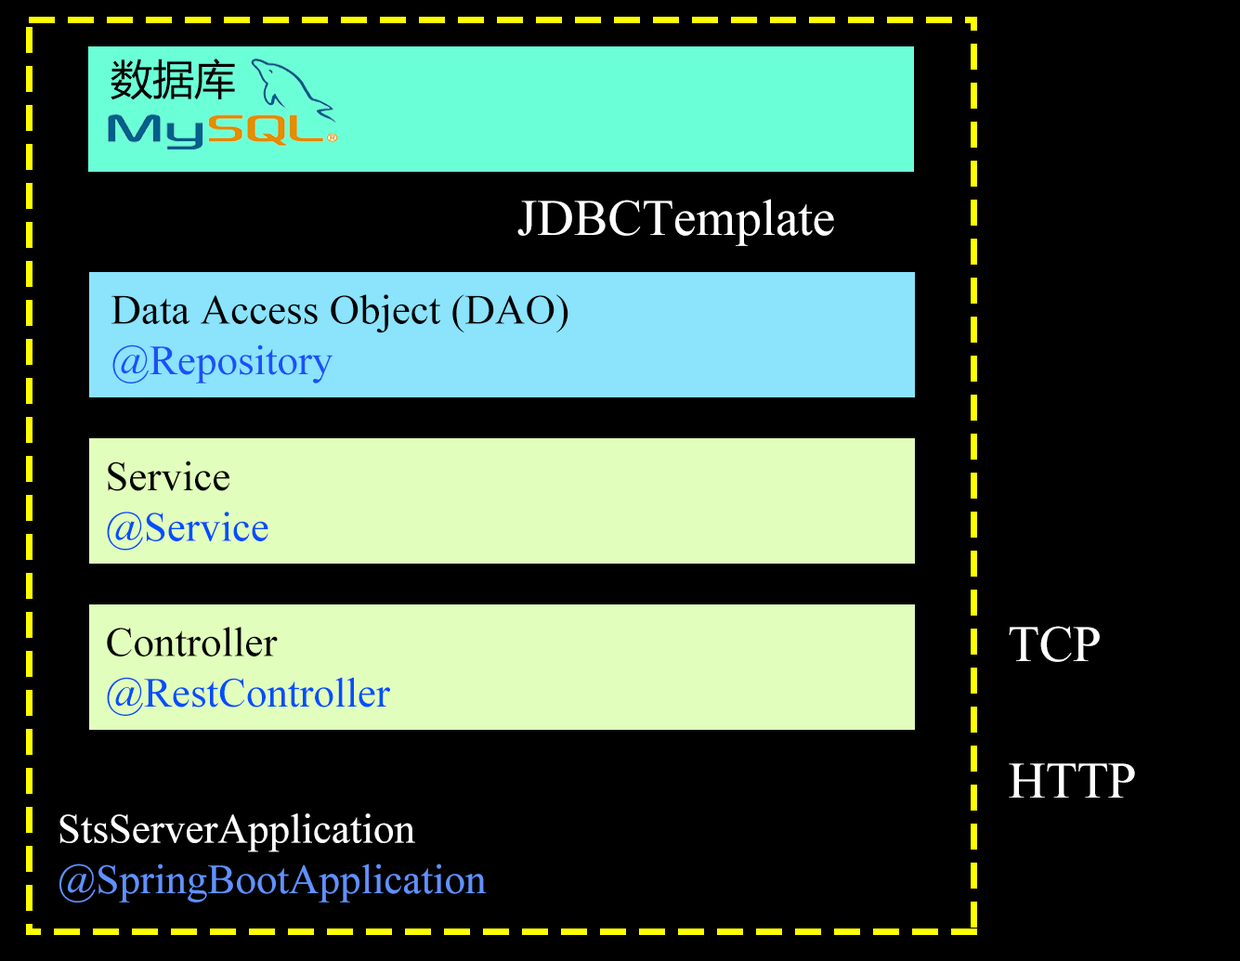
<style>
.page{position:relative;width:1240px;height:961px;background:#000000}
.page>*{position:absolute;margin:0}
.t1{font:41.8px "MicrosoftYaHei";color:#000000}
.t2{font:51.2px "TimesNewRomanPSMT";color:#ffffff}
.t3{font:41.8px/16.9px "TimesNewRomanPSMT";color:#000000}
.t4{font:41.8px/16.9px "TimesNewRomanPSMT";color:#1c50f8}
.t5{font:41.8px/16.9px "TimesNewRomanPSMT";color:#024efc}
.t6{font:51.1px "TimesNewRomanPSMT";color:#ffffff}
.t7{font:41.8px/16.9px "TimesNewRomanPSMT";color:#6191ff}
.t8{font:41.8px/16.9px "TimesNewRomanPSMT";color:#ffffff}
</style>
<div class="page">
<p class="t1" style="left:111px;top:59px;width:124px;height:41px">数据库</p>
<p class="t2" style="left:517px;top:199px;width:317px;height:47px">JDBCTemplate</p>
<p class="t3" style="left:111px;top:294px;width:458px;height:90px">Data Access Object (DAO)<br><br><br><span class="t4">@Repository</span></p>
<p class="t5" style="left:107px;top:461px;width:161px;height:90px"><span class="t3">Service<br><br><br></span>@Service</p>
<p class="t5" style="left:107px;top:627px;width:283px;height:89px"><span class="t3">Controller<br><br><br></span>@RestController</p>
<p class="t6" style="left:1009px;top:626px;width:91px;height:36px">TCP</p>
<p class="t6" style="left:1009px;top:764px;width:126px;height:34px">HTTP</p>
<p class="t7" style="left:59px;top:814px;width:428px;height:89px"><span class="t8">StsServerApplication<br><br><br></span>@SpringBootApplication</p>
</div>
